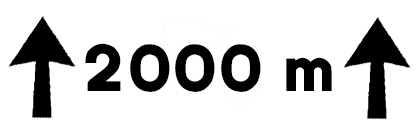
<style>
.page{position:relative;width:420px;height:120px;background:#ffffff}
.page>*{position:absolute;margin:0}
.t1{font:65px "Ccrige-Regular";color:#000000}
</style>
<div class="page">
<p class="t1" style="left:85px;top:43px;width:247px;height:49px">2000 m</p>
</div>
